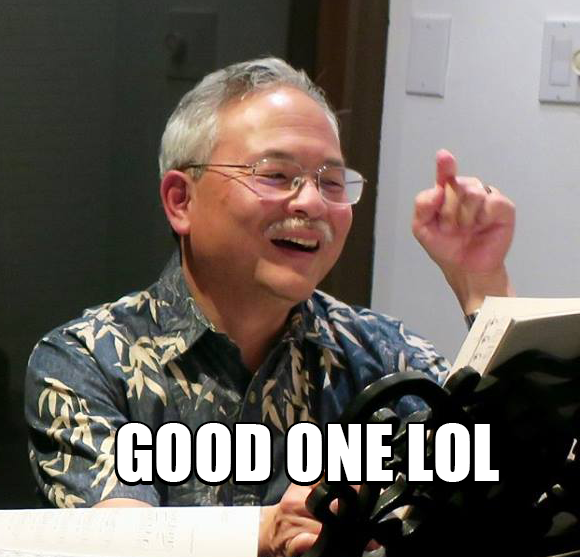
<style>
.page{position:relative;width:580px;height:557px}
.page>*{position:absolute;margin:0}
.t1{font:72px "Impact";color:#ffffff}
</style>
<div class="page">
<p class="t1" style="left:117px;top:423px;width:382px;height:59px">GOOD ONE LOL</p>
</div>
